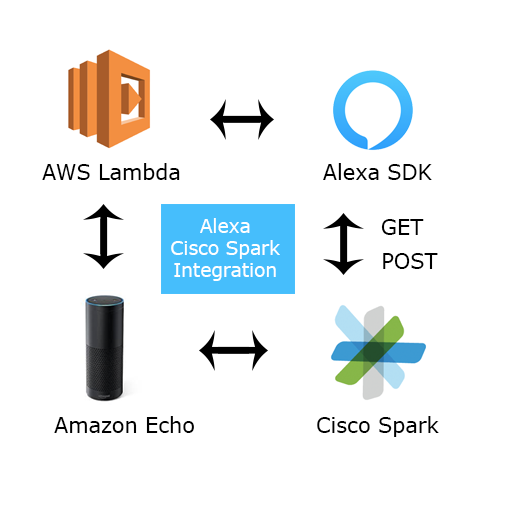
<style>
.page{position:relative;width:512px;height:512px;background:#ffffff}
.page>*{position:absolute;margin:0}
.t1{font:20.8px "Verdana";color:#000000}
.t2{font:18.6px "Verdana";color:#ffffff}
</style>
<div class="page">
<p class="t1" style="left:42px;top:163px;width:138px;height:17px">AWS Lambda</p>
<p class="t1" style="left:323px;top:163px;width:109px;height:17px">Alexa SDK</p>
<p class="t2" style="left:171px;top:218px;width:109px;height:63px;text-align:center">Alexa<br>Cisco Spark<br>Integration</p>
<p class="t1" style="left:381px;top:219px;width:43px;height:16px">GET</p>
<p class="t1" style="left:383px;top:253px;width:55px;height:16px">POST</p>
<p class="t1" style="left:54px;top:416px;width:140px;height:17px">Amazon Echo</p>
<p class="t1" style="left:317px;top:416px;width:122px;height:21px">Cisco Spark</p>
</div>
